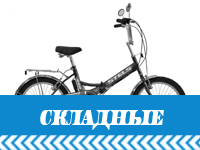
<style>
.page{position:relative;width:200px;height:150px;background:#ffffff}
.page>*{position:absolute;margin:0}
.t1{font:19.3px "Dollar";letter-spacing:0.05em;color:#ffffff;font-style:italic;scale:0.69 1}
</style>
<div class="page">
<p class="t1" style="left:40px;top:110px;width:124px;height:20px">Складные</p>
</div>
